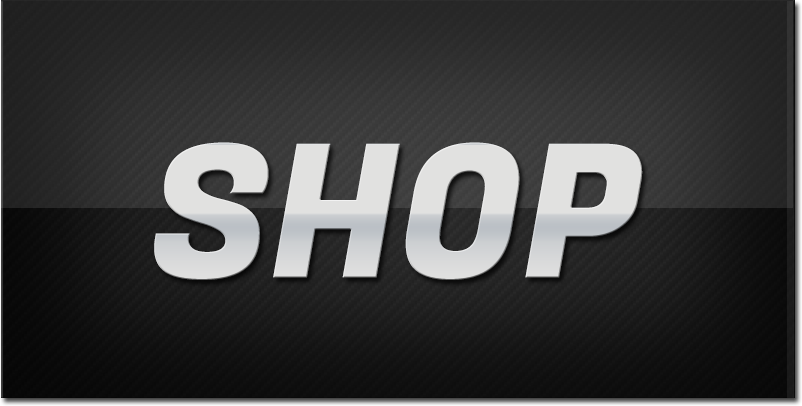
<style>
.page{position:relative;width:802px;height:406px}
.page>*{position:absolute;margin:0}
.t1{font:185.2px "FugazOne-Regular";color:#dfdfdf}
</style>
<div class="page">
<p class="t1" style="left:154px;top:142px;width:489px;height:138px">SHOP</p>
</div>
